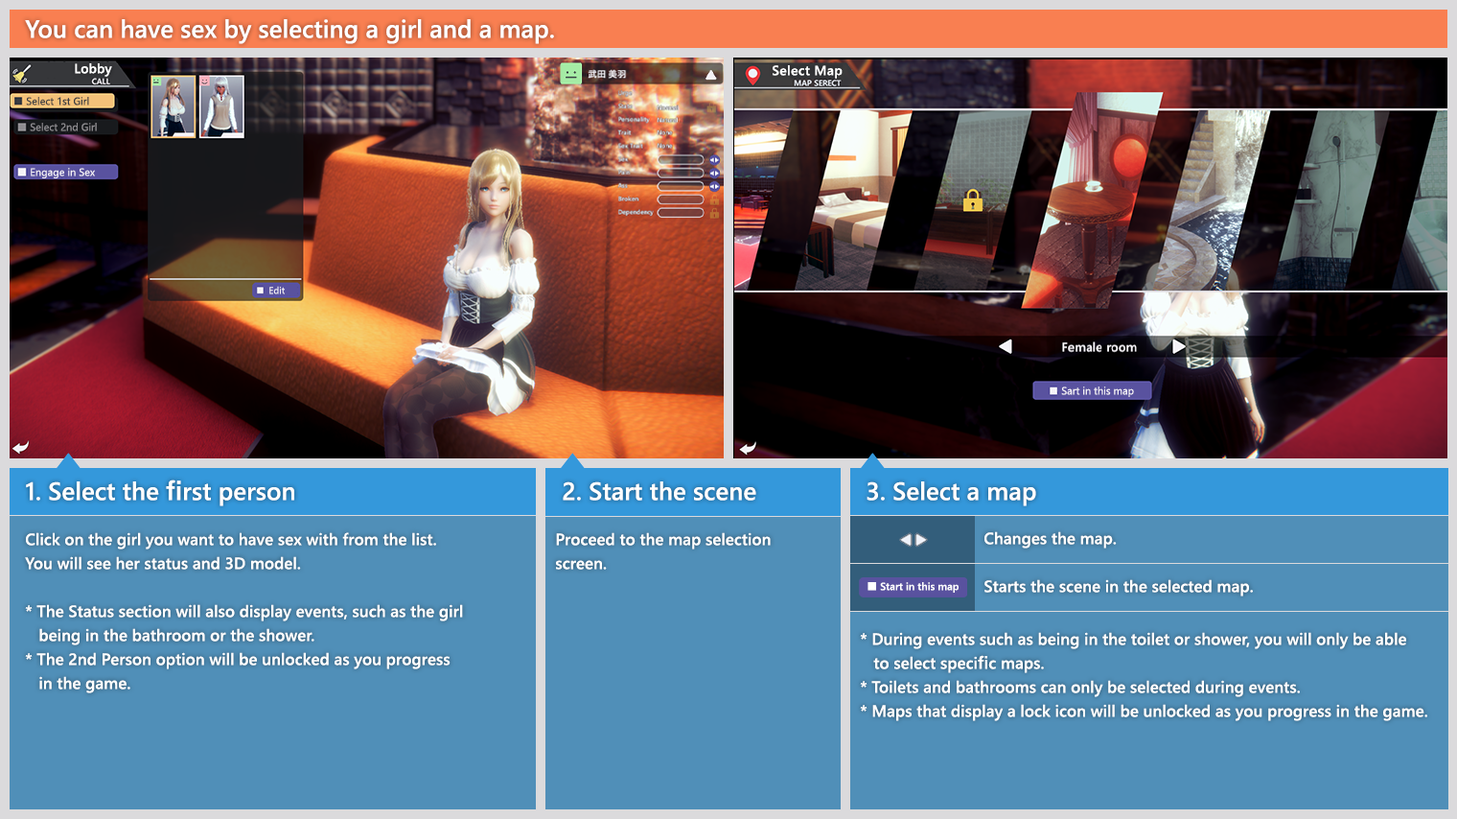
<style>
.page{position:relative;width:1457px;height:819px;background:#508fb8}
.page>*{position:absolute;margin:0}
.t1{font:24.9px "YuGothicUI-Semibold";color:#ffffff}
.t2{font:13.4px "YuGothicUI-Semibold";color:#ffffff}
.t3{font:13.4px "YuGothicUI-Semibold";letter-spacing:0.025em;color:#ffffff}
.t4{font:10.5px "YuGothicUI-Regular";color:#3b3d42}
.t5{font:10.5px "YuGothicUI-Regular";color:#8d8b8f}
.t6{font:10.5px "YuGothicUI-Regular";color:#f4f1f6}
.t7{font:9.6px "YuGothicUI-Regular";color:#f4f1f6}
.t8{font:16.3px/24px "YuGothicUI-Semibold";color:#ffffff}
.t9{font:16.3px "YuGothicUI-Semibold";color:#ffffff}
.t10{font:10.5px "YuGothicUI-Semibold";color:#ffffff}
</style>
<div class="page">
<p class="t1" style="left:25px;top:19px;width:529px;height:25px">You can have sex by selecting a girl and a map.</p>
<p class="t2" style="left:75px;top:63px;width:37px;height:14px">Lobby</p>
<p class="t3" style="left:773px;top:65px;width:69px;height:14px">Select Map</p>
<p class="t4" style="left:26px;top:97px;width:63px;height:8px">Select 1st Girl</p>
<p class="t5" style="left:30px;top:123px;width:67px;height:8px">Select 2nd Girl</p>
<p class="t6" style="left:31px;top:168px;width:64px;height:10px">Engage in Sex</p>
<p class="t7" style="left:269px;top:286px;width:16px;height:8px">Edit</p>
<p class="t6" style="left:1061px;top:386px;width:73px;height:11px">Sart in this map</p>
<p class="t1" style="left:26px;top:479px;width:268px;height:27px">1. Select the first person</p>
<p class="t1" style="left:563px;top:481px;width:193px;height:19px">2. Start the scene</p>
<p class="t1" style="left:866px;top:481px;width:170px;height:25px">3. Select a map</p>
<p class="t8" style="left:25px;top:532px;width:438px;height:161px">Click on the girl you want to have sex with from the list.<br>You will see her status and 3D model.<br><br>* The Status section will also display events, such as the girl<br>   being in the bathroom or the shower.<br>* The 2nd Person option will be unlocked as you progress<br>   in the game.</p>
<p class="t8" style="left:556px;top:532px;width:215px;height:37px">Proceed to the map selection<br>screen.</p>
<p class="t9" style="left:984px;top:531px;width:133px;height:17px">Changes the map.</p>
<p class="t10" style="left:867px;top:582px;width:91px;height:10px">■ Start in this map</p>
<p class="t9" style="left:984px;top:579px;width:269px;height:17px">Starts the scene in the selected map.</p>
<p class="t8" style="left:860px;top:632px;width:567px;height:89px">* During events such as being in the toilet or shower, you will only be able<br>   to select specific maps.<br>* Toilets and bathrooms can only be selected during events.<br>* Maps that display a lock icon will be unlocked as you progress in the game.</p>
</div>
